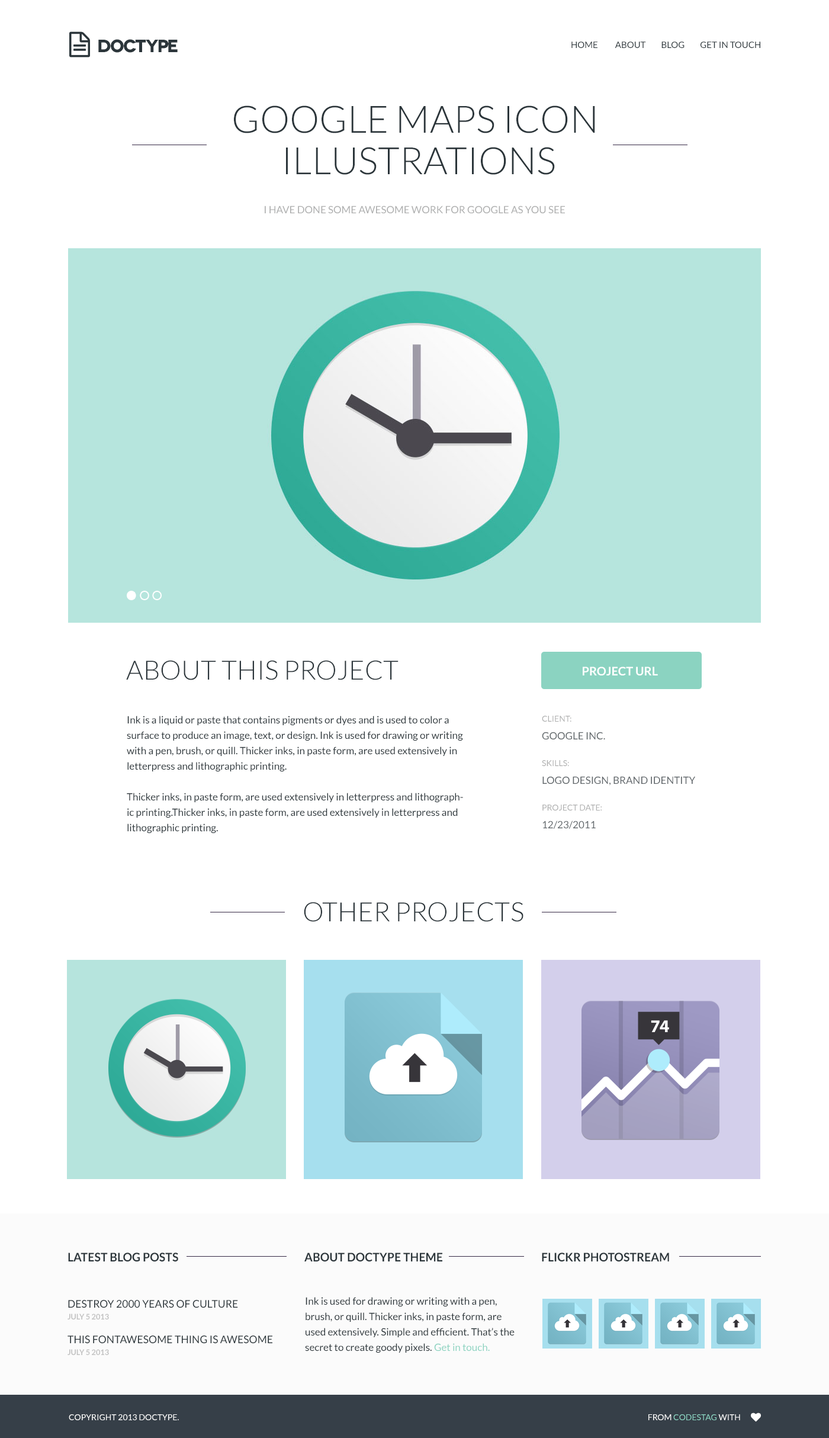
<style>
.page{position:relative;width:829px;height:1438px;background:#ffffff}
.page>*{position:absolute;margin:0}
.t1{font:17.8px "Novecentowide-Bold";letter-spacing:-0.07em;color:#2b353a;text-transform:uppercase}
.t2{font:8.9px "Lato-Regular";color:#2b353a;text-transform:uppercase}
.t3{font:37.6px/41.5px "Lato-Light";color:#2b353a;text-transform:uppercase}
.t4{font:10.1px "Lato-Regular";color:#aeafaf;text-transform:uppercase}
.t5{font:26.7px "Lato-Light";color:#2b353a;text-transform:uppercase}
.t6{font:11.8px "Lato-Bold";color:#ffffff;text-transform:uppercase}
.t7{font:10.1px/15.4px "Lato-Regular";color:#2b353a}
.t8{font:10.1px/17.8px "Lato-Regular";color:#61676b;text-transform:uppercase}
.t9{font:8.3px/26.7px "Lato-Regular";color:#aeafaf;text-transform:uppercase}
.t10{font:11.8px "Lato-Bold";color:#2b353a;text-transform:uppercase}
.t11{font:10.7px/14.1px "Lato-Regular";color:#2b353a;text-transform:uppercase}
.t12{font:7.7px/11.8px "Lato-Bold";color:#c2c2c2;text-transform:uppercase}
.t13{font:10.1px/15.4px "Lato-Regular";color:#8bd3c1}
.t14{font:8.3px "Lato-Regular";color:#ffffff;text-transform:uppercase}
.t15{font:8.3px "Lato-Regular";color:#8bd3c1;text-transform:uppercase}
</style>
<div class="page">
<p class="t1" style="left:98px;top:39px;width:80px;height:14px">DOCTYPE</p>
<p class="t2" style="left:572px;top:41px;width:189px;height:7px">HOME          ABOUT         BLOG         GET IN TOUCH</p>
<p class="t3" style="left:234px;top:105px;width:361px;height:70px;text-align:center">GOOGLE MAPS ICON <br>ILLUSTRATIONs</p>
<p class="t4" style="left:265px;top:206px;width:300px;height:7px">i have done some awesome work for google as you see</p>
<p class="t5" style="left:126px;top:660px;width:273px;height:20px">about this project</p>
<p class="t6" style="left:583px;top:666px;width:75px;height:9px">project url</p>
<p class="t7" style="left:127px;top:716px;width:336px;height:117px">Ink is a liquid or paste that contains pigments or dyes and is used to color a surface to produce an image, text, or design. Ink is used for drawing or writing with a pen, brush, or quill. Thicker inks, in paste form, are used extensively in letterpress and lithographic printing. <br><br>Thicker inks, in paste form, are used extensively in letterpress and lithographic printing.Thicker inks, in paste form, are used extensively in letterpress and lithographic printing.</p>
<p class="t8" style="left:542px;top:716px;width:153px;height:113px"><span class="t9">client:<br></span>google inc.<br><span class="t9">skills:<br></span>logo design, brand identity<br><span class="t9">project date:<br></span>12/23/2011</p>
<p class="t5" style="left:304px;top:902px;width:220px;height:20px">other projects</p>
<p class="t10" style="left:68px;top:1252px;width:110px;height:10px">LATEST blog POSTS</p>
<p class="t10" style="left:304px;top:1252px;width:139px;height:10px">about doctype theme</p>
<p class="t10" style="left:542px;top:1252px;width:127px;height:10px">flickr photostream</p>
<p class="t11" style="left:68px;top:1300px;width:170px;height:19px">destroy 2000 years of culture<br><span class="t12">july 5 2013</span></p>
<p class="t7" style="left:305px;top:1297px;width:210px;height:55px">Ink is used for drawing or writing with a pen, brush, or quill. Thicker inks, in paste form, are used extensively. Simple and efficient. That’s the secret to create goody pixels.<span class="t13"> Get in touch.</span></p>
<p class="t11" style="left:68px;top:1335px;width:205px;height:20px">this fontawesome thing is awesome   <br><span class="t12">july 5 2013</span></p>
<p class="t14" style="left:69px;top:1414px;width:110px;height:6px">Copyright 2013 Doctype.</p>
<p class="t15" style="left:649px;top:1414px;width:92px;height:6px"><span class="t14">from </span>codestag <span class="t14">with</span></p>
</div>
